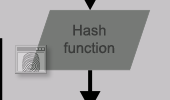
<style>
.page{position:relative;width:170px;height:100px;background:#c6c3c6}
.page>*{position:absolute;margin:0}
.t1{font:14.7px "ArialMT";color:#3b3c3b}
</style>
<div class="page">
<p class="t1" style="left:63px;top:24px;width:52px;height:30px;text-align:center">Hash<br>function</p>
</div>
